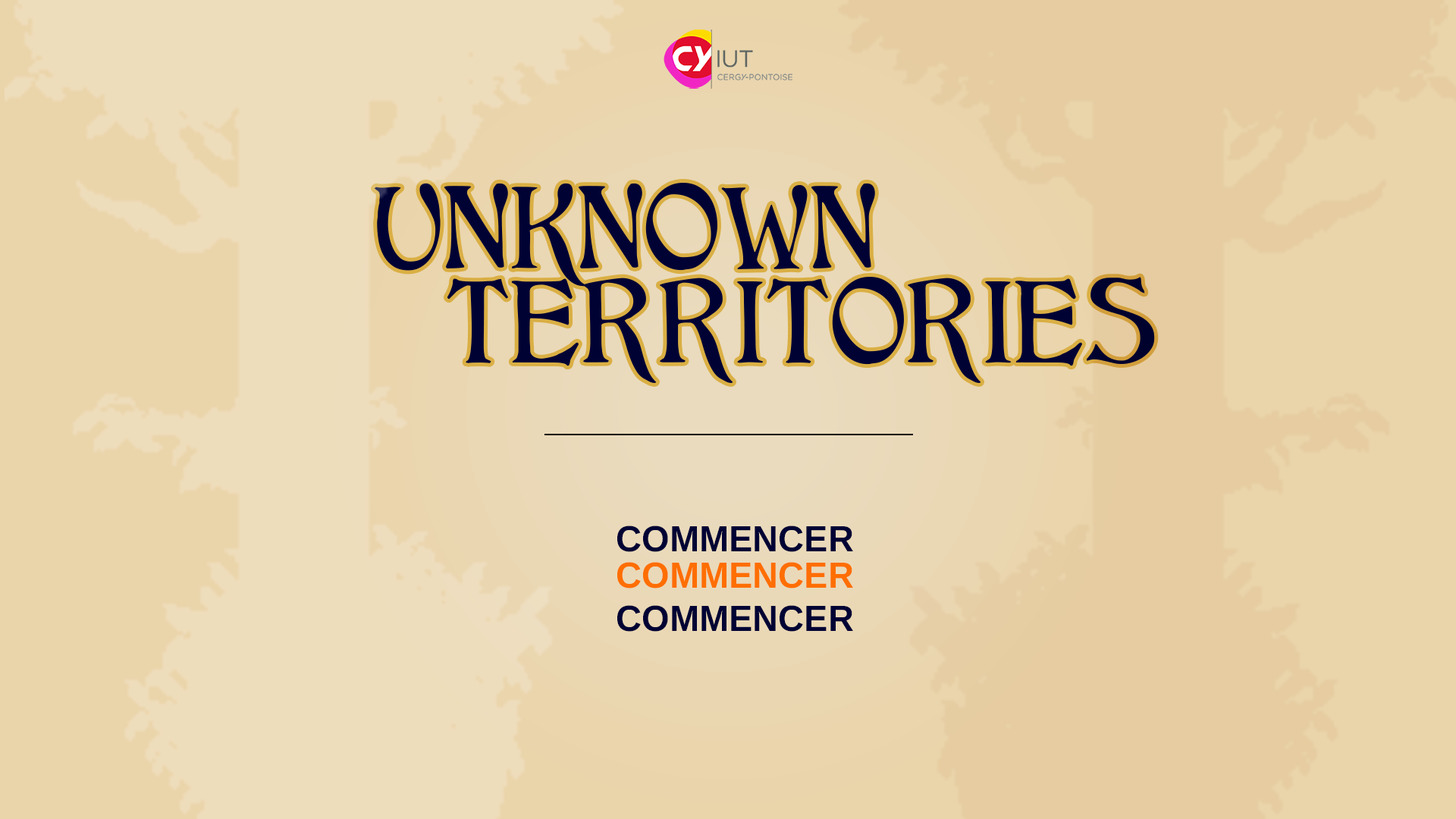
<style>
.page{position:relative;width:1456px;height:819px;background:#ead4aa}
.page>*{position:absolute;margin:0}
.t1{font:112.6px "CATChilds";color:#000234;text-transform:uppercase}
.t2{font:36.4px "LiberationSans-Bold";color:#000234;text-transform:uppercase}
.t3{font:36.4px "LiberationSans-Bold";color:#ff6e00;text-transform:uppercase}
</style>
<div class="page">
<p class="t1" style="left:374px;top:183px;width:501px;height:104px">Unknown</p>
<p class="t1" style="left:447px;top:277px;width:708px;height:106px">Territories</p>
<p class="t2" style="left:617px;top:526px;width:236px;height:26px">Commencer</p>
<p class="t3" style="left:617px;top:562px;width:236px;height:26px">Commencer</p>
<p class="t2" style="left:617px;top:605px;width:236px;height:27px">Commencer</p>
</div>
